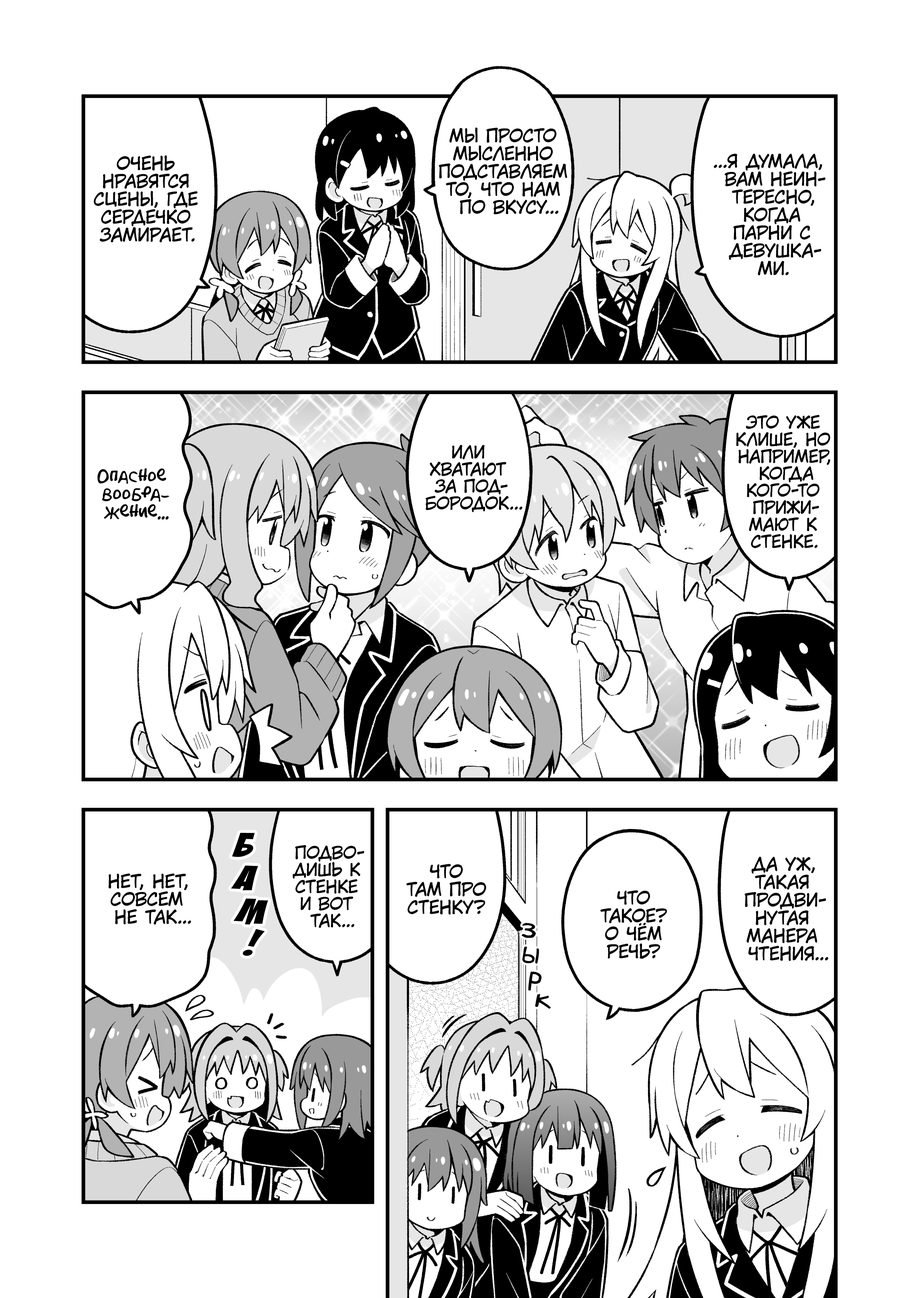
<style>
.page{position:relative;width:919px;height:1298px;background:#ffffff}
.page>*{position:absolute;margin:0}
.t1{font:17.9px "KuraiVoice2";color:#000000;text-transform:uppercase}
.t2{font:17px "KuraiVoice2";color:#000000;text-transform:uppercase}
.t3{font:17.9px "AkbarPlain";color:#000000}
.t4{font:38.3px "BadaBoom";color:#000000;scale:1.2 1}
.t5{font:30.6px "v_Augie";color:#000000}
</style>
<div class="page">
<p class="t1" style="left:439px;top:127px;width:128px;height:87px;text-align:center">Мы просто<br>мысленно<br>подставляем<br>то, что нам<br>по вкусу...</p>
<p class="t1" style="left:94px;top:155px;width:104px;height:88px;text-align:center">очень<br>нравятся<br>сцены, где<br>сердечко<br>замирает.</p>
<p class="t1" style="left:714px;top:153px;width:111px;height:122px;text-align:center">...Я думала,<br>вам неин-<br>тересно,<br>когда<br>парни с<br>девушка-<br>ми.</p>
<p class="t2" style="left:736px;top:415px;width:94px;height:133px;text-align:center">Это уже<br>клише, но<br>например,<br>когда<br>кого-то<br>прижи-<br>мают к<br>стенке.</p>
<p class="t2" style="left:425px;top:445px;width:97px;height:67px;text-align:center">Или<br>хватают<br>за под-<br>бородок...</p>
<p class="t3" style="left:97px;top:468px;width:72px;height:51px;text-align:center">Опасное<br>вообра-<br>жение...</p>
<p class="t4" style="left:232px;top:833px;width:23px;height:24px;rotate:9deg">б</p>
<p class="t2" style="left:293px;top:845px;width:71px;height:83px;text-align:center">Подво-<br>дишь к<br>стенке<br>и вот<br>так...</p>
<p class="t1" style="left:745px;top:856px;width:83px;height:105px;text-align:center">Да уж,<br>такая<br>продви-<br>нутая<br>манера<br>чтения...</p>
<p class="t4" style="left:231px;top:865px;width:27px;height:25px;rotate:10deg">а</p>
<p class="t1" style="left:406px;top:864px;width:80px;height:50px;text-align:center">Что<br>там про<br>стенку?</p>
<p class="t1" style="left:108px;top:873px;width:83px;height:51px;text-align:center">Нет, нет,<br>совсем<br>не так...</p>
<p class="t1" style="left:600px;top:890px;width:67px;height:69px;text-align:center">Что<br>такое?<br>О чём<br>речь?</p>
<p class="t4" style="left:234px;top:898px;width:34px;height:26px;rotate:10deg">м</p>
<p class="t4" style="left:243px;top:929px;width:22px;height:27px;rotate:7deg">!</p>
<p class="t5" style="left:522px;top:922px;width:14px;height:16px;rotate:6deg">з</p>
<p class="t5" style="left:522px;top:946px;width:17px;height:18px;rotate:6deg">ы</p>
<p class="t5" style="left:528px;top:971px;width:14px;height:19px;rotate:12deg">р</p>
<p class="t5" style="left:535px;top:993px;width:16px;height:16px;rotate:9deg">к</p>
</div>
